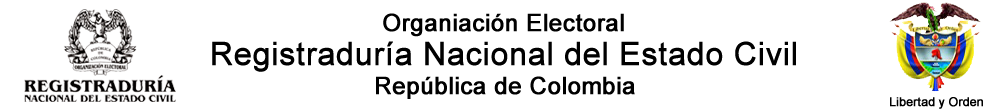
<style>
.page{position:relative;width:1000px;height:112px;background:#ffffff}
.page>*{position:absolute;margin:0}
.t1{font:24px "ArialMT";color:#000000;font-weight:bold}
.t2{font:32px "ArialMT";color:#000000;font-weight:bold}
.t3{font:12px "ArialMT";color:#000000;font-weight:bold}
</style>
<div class="page">
<p class="t1" style="left:383px;top:13px;width:241px;height:24px">Organiación Electoral</p>
<p class="t2" style="left:212px;top:41px;width:584px;height:31px">Registraduría Nacional del Estado Civil</p>
<p class="t1" style="left:376px;top:76px;width:259px;height:23px">República de Colombia</p>
<p class="t3" style="left:890px;top:97px;width:93px;height:12px">Libertad y Orden</p>
</div>
